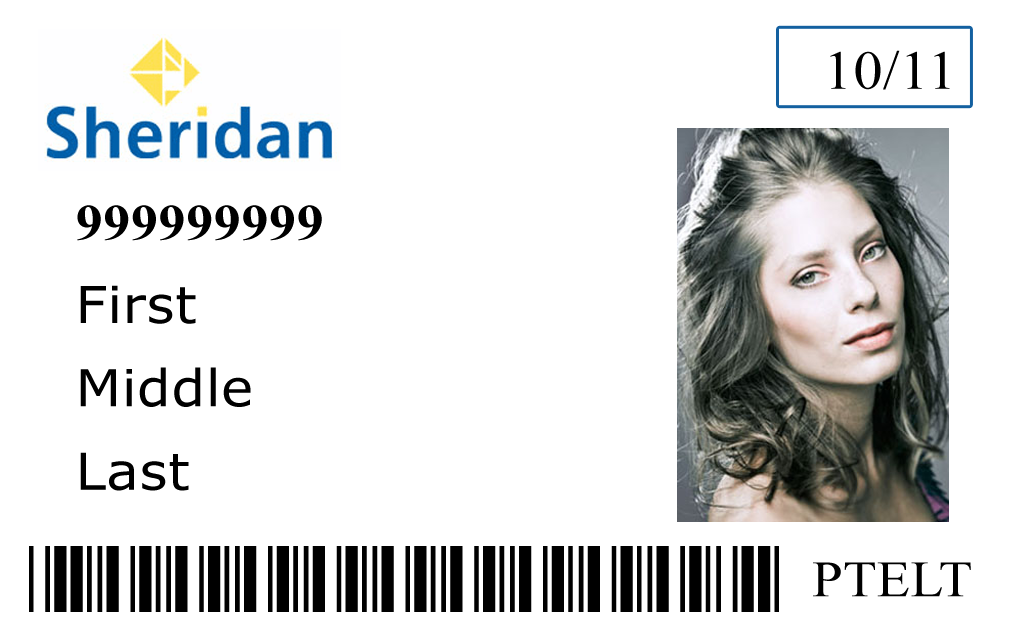
<style>
.page{position:relative;width:1011px;height:638px;background:#ffffff}
.page>*{position:absolute;margin:0}
.t1{font:54.8px "TimesNewRomanPSMT";letter-spacing:0.01em;color:#000000;scale:1.06 1}
.t2{font:50.9px/83.3px "Verdana";letter-spacing:0.01em;color:#000000;scale:1.06 1}
.t3{font:50.9px/83.3px "TimesNewRomanPS-BoldMT";letter-spacing:0.01em;color:#000000;scale:1.06 1}
.t4{font:87.5px "Free3of9Extended";letter-spacing:0.01em;color:#000000;scale:2 1}
.t5{font:50.9px "TimesNewRomanPSMT";letter-spacing:0.01em;color:#000000;scale:1.06 1}
</style>
<div class="page">
<p class="t1" style="left:830px;top:50px;width:120px;height:40px">10/11</p>
<p class="t2" style="left:77px;top:205px;width:245px;height:286px"><span class="t3">999999999<br></span>First<br>Middle<br>Last</p>
<p class="t4" style="left:29px;top:546px;width:750px;height:66px">*999999999*</p>
<p class="t5" style="left:813px;top:562px;width:158px;height:35px">PTELT</p>
</div>
